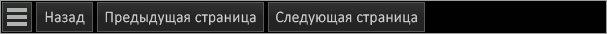
<style>
.page{position:relative;width:607px;height:34px;background:#010101}
.page>*{position:absolute;margin:0}
.t1{font:16px "Calibri-Light";letter-spacing:0.02em;color:#d7d7d7;scale:0.96 1}
</style>
<div class="page">
<p class="t1" style="left:45px;top:11px;width:40px;height:14px">Назад</p>
<p class="t1" style="left:105px;top:11px;width:151px;height:14px">Предыдущая страница</p>
<p class="t1" style="left:276px;top:11px;width:141px;height:14px">Следующая страница</p>
</div>
